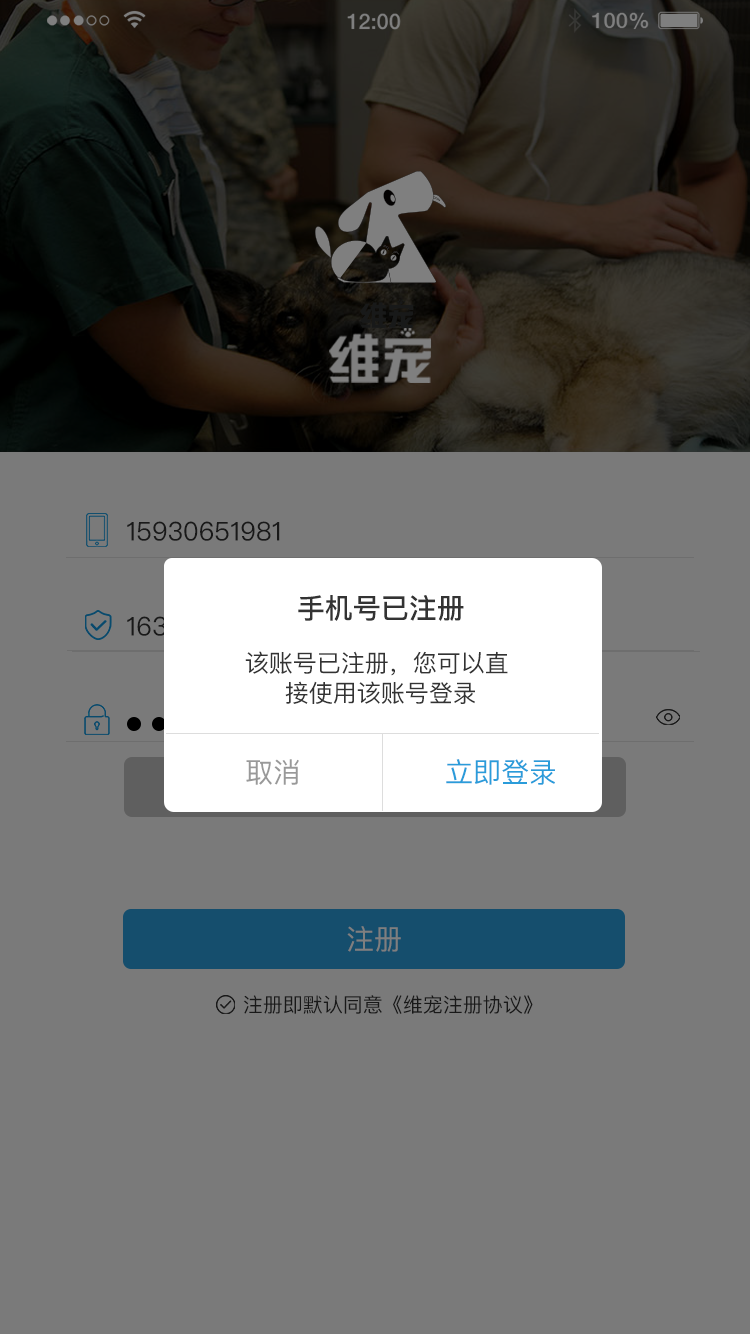
<style>
.page{position:relative;width:750px;height:1334px;background:#7a7a7a}
.page>*{position:absolute;margin:0}
.t1{font:26px "PingFangSC-Regular";color:#191919}
.t2{font:28px "PingFangSC-Medium";color:#333333}
.t3{font:24px/30px "PingFangSC-Regular";color:#333333}
.t4{font:28px "PingFangSC-Regular";color:#999999}
.t5{font:28px "PingFangSC-Regular";color:#2a9cda}
.t6{font:28px "PingFangSC-Regular";color:#7f7f7f}
.t7{font:20px "PingFangSC-Regular";color:#191919}
</style>
<div class="page">
<p class="t1" style="left:127px;top:521px;width:153px;height:20px">15930651981</p>
<p class="t2" style="left:298px;top:595px;width:166px;height:26px">手机号已注册</p>
<p class="t3" style="left:245px;top:651px;width:263px;height:53px">该账号已注册，您可以直<br>     接使用该账号登录</p>
<p class="t4" style="left:246px;top:759px;width:53px;height:26px">取消</p>
<p class="t5" style="left:446px;top:759px;width:109px;height:26px">立即登录</p>
<p class="t6" style="left:347px;top:926px;width:54px;height:26px">注册</p>
<p class="t7" style="left:243px;top:995px;width:290px;height:19px">注册即默认同意《维宠注册协议》</p>
</div>
